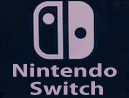
<style>
.page{position:relative;width:129px;height:98px;background:#051022}
.page>*{position:absolute;margin:0}
.t1{font:18.9px/18px "MyriadPro-Bold";color:#b69cb5;scale:1.34 1}
</style>
<div class="page">
<p class="t1" style="left:13px;top:63px;width:104px;height:32px;text-align:center">Nintendo <br>Switch</p>
</div>
